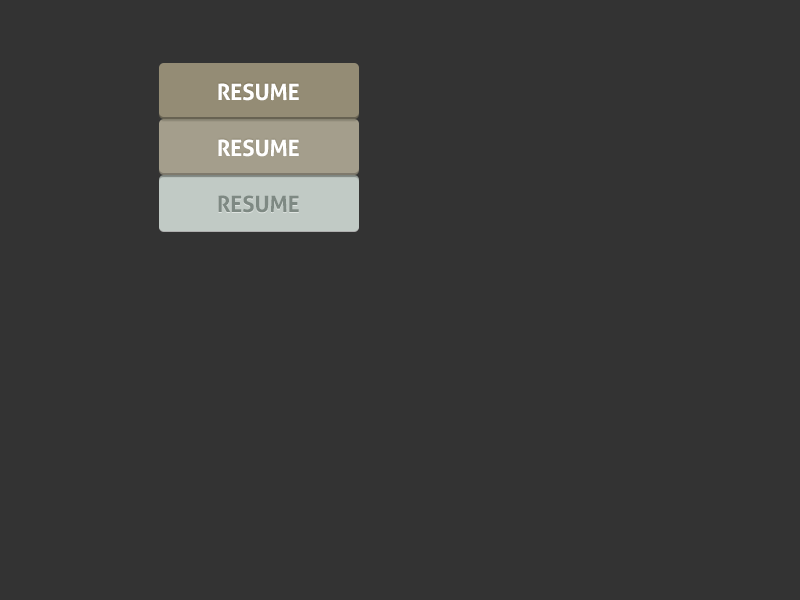
<style>
.page{position:relative;width:800px;height:600px;background:#333333}
.page>*{position:absolute;margin:0}
.t1{font:22.4px "Aller-Bold";color:#ffffff}
.t2{font:22.4px "Aller-Bold";color:#7e8983}
</style>
<div class="page">
<p class="t1" style="left:218px;top:83px;width:81px;height:18px">RESUME</p>
<p class="t1" style="left:218px;top:139px;width:81px;height:18px">RESUME</p>
<p class="t2" style="left:218px;top:195px;width:81px;height:18px">RESUME</p>
</div>
